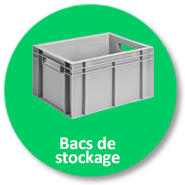
<style>
.page{position:relative;width:185px;height:185px;background:#00cc66}
.page>*{position:absolute;margin:0}
.t1{font:18px/14px "Calibri-Bold";color:#ffffff}
.t2{font:18px "Calibri-Bold";color:#ffffff}
</style>
<div class="page">
<p class="t1" style="left:55px;top:136px;width:65px;height:31px;text-align:center"><span class="t2">Bacs de</span> <br>stockage</p>
</div>
